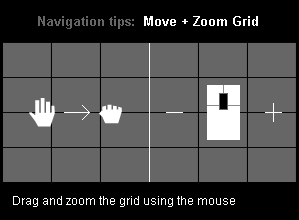
<style>
.page{position:relative;width:299px;height:220px;background:#666666}
.page>*{position:absolute;margin:0}
.t1{font:13px "Arial-BoldMT";color:#666666}
.t2{font:13px "Arial-BoldMT";color:#ffffff}
.t3{font:12px "ArialMT";color:#ffffff}
</style>
<div class="page">
<p class="t1" style="left:38px;top:16px;width:220px;height:13px">Navigation tips: <span class="t2"> Move + Zoom Grid</span></p>
<p class="t3" style="left:13px;top:196px;width:222px;height:11px">Drag and zoom the grid using the mouse</p>
</div>
